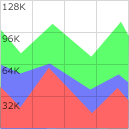
<style>
.page{position:relative;width:129px;height:129px;background:#ffffff}
.page>*{position:absolute;margin:0}
.t1{font:9px "Verdana"}
</style>
<div class="page">
<p class="t1" style="left:3px;top:3px;width:23px;height:7px">128K</p>
<p class="t1" style="left:2px;top:35px;width:18px;height:7px">96K</p>
<p class="t1" style="left:2px;top:67px;width:18px;height:7px">64K</p>
<p class="t1" style="left:2px;top:102px;width:18px;height:7px">32K</p>
</div>
